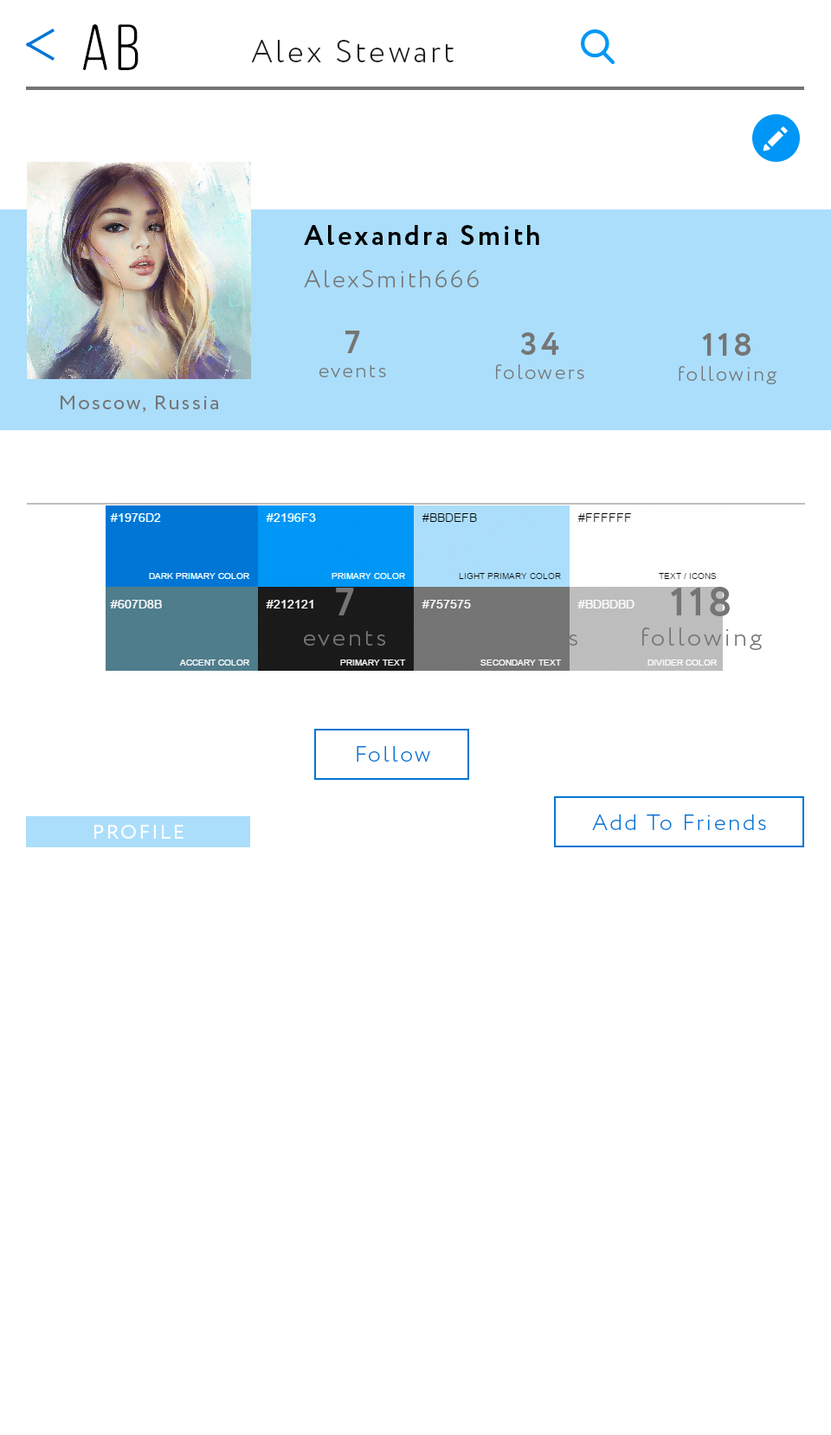
<style>
.page{position:relative;width:831px;height:1435px;background:#ffffff}
.page>*{position:absolute;margin:0}
.t1{font:65.4px "ClutchSans-Regular";letter-spacing:0.1em;color:#000000}
.t2{font:31.2px "Circe-Light";letter-spacing:0.1em;color:#1a1a1a}
.t3{font:27.7px "Circe-Bold";letter-spacing:0.1em;color:#000000}
.t4{font:24.2px "Circe-Light";letter-spacing:0.1em;color:#757575}
.t5{font:20.6px "Circe-Light";letter-spacing:0.1em;color:#757575}
.t6{font:32.2px "Circe-Bold";letter-spacing:0.1em;color:#757575}
.t7{font:19.9px "Circe-Regular";letter-spacing:0.1em;color:#757575}
.t8{font:25.4px "Circe-Light";letter-spacing:0.1em;color:#757575}
.t9{font:39.6px "Circe-Bold";letter-spacing:0.1em;color:#757575}
.t10{font:22.5px "Circe-Light";letter-spacing:0.1em;color:#0076d6}
.t11{font:19.9px "Circe-Regular";letter-spacing:0.1em;color:#ffffff}
</style>
<div class="page">
<p class="t1" style="left:83px;top:24px;width:55px;height:46px">Ab</p>
<p class="t2" style="left:251px;top:40px;width:203px;height:22px">Alex Stewart</p>
<p class="t3" style="left:304px;top:225px;width:235px;height:20px">Alexandra Smith</p>
<p class="t4" style="left:304px;top:270px;width:175px;height:17px">AlexSmith666</p>
<p class="t5" style="left:319px;top:331px;width:67px;height:46px;text-align:center"><span class="t6">7<br></span>events</p>
<p class="t5" style="left:496px;top:332px;width:88px;height:47px;text-align:center"><span class="t6">34<br></span>folowers</p>
<p class="t5" style="left:679px;top:333px;width:97px;height:51px;text-align:center"><span class="t6">118<br></span>following</p>
<p class="t7" style="left:61px;top:396px;width:157px;height:16px">Moscow, Russia</p>
<p class="t8" style="left:304px;top:588px;width:81px;height:58px;text-align:center"><span class="t9">7<br></span>events</p>
<p class="t8" style="left:642px;top:587px;width:120px;height:63px;text-align:center"><span class="t9">118<br></span>following</p>
<p class="t10" style="left:357px;top:746px;width:73px;height:16px">Follow</p>
<p class="t10" style="left:592px;top:814px;width:174px;height:16px">Add To Friends</p>
<p class="t11" style="left:94px;top:825px;width:89px;height:14px">PROFILE</p>
</div>
